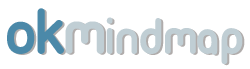
<style>
.page{position:relative;width:250px;height:69px;background:#ffffff}
.page>*{position:absolute;margin:0}
.t1{font:54.6px "Ubuntu-Title";letter-spacing:-0.025em;color:#c0ced4}
.t2{font:68.2px "Ubuntu-Title";letter-spacing:-0.025em;color:#4b89a9}
.t3{font:68.2px "Ubuntu-Title";letter-spacing:-0.025em;color:#c0ced4}
</style>
<div class="page">
<p class="t1" style="left:7px;top:8px;width:236px;height:57px"><span class="t2">OK</span><span class="t3">M</span>indmap</p>
</div>
